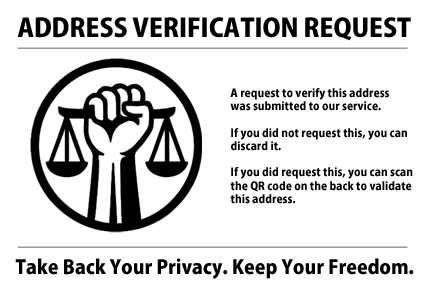
<style>
.page{position:relative;width:432px;height:288px;background:#ffffff}
.page>*{position:absolute;margin:0}
.t1{font:25.3px "KozGoPr6N-Heavy";color:#000000}
.t2{font:11px "KozGoPr6N-Heavy";color:#000000}
.t3{font:19.2px "KozGoPr6N-Heavy";color:#000000}
</style>
<div class="page">
<p class="t1" style="left:17px;top:17px;width:394px;height:24px">ADDRESS VERIFICATION REQUEST</p>
<p class="t2" style="left:230px;top:88px;width:183px;height:116px">A request to verify this address<br>was submitted to our service. <br><br>If you did not request this, you can <br>discard it. <br><br>If you did request this, you can scan<br>the QR code on the back to validate <br>this address.</p>
<p class="t3" style="left:15px;top:258px;width:399px;height:21px">Take Back Your Privacy. Keep Your Freedom.</p>
</div>
